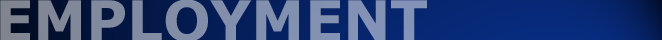
<style>
.page{position:relative;width:662px;height:40px}
.page>*{position:absolute;margin:0}
.t1{font:56px "Verdana-Bold";letter-spacing:-0.005em;color:#828eaa}
</style>
<div class="page">
<p class="t1" style="left:0px;top:0px;width:427px;height:42px">EMPLOYMENT</p>
</div>
